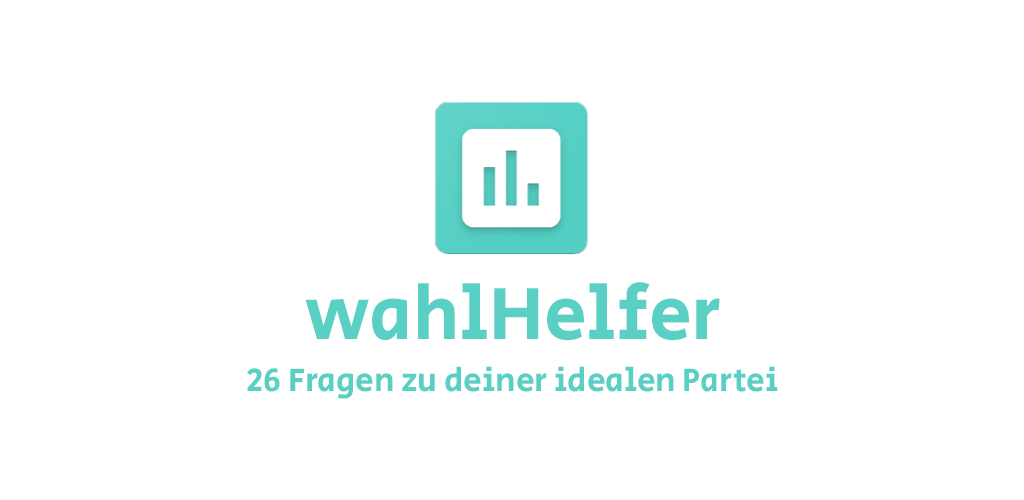
<style>
.page{position:relative;width:1024px;height:500px;background:#ffffff}
.page>*{position:absolute;margin:0}
.t1{font:76.4px "SecularOne-Regular";color:#5ad0c5}
.t2{font:33.3px "SecularOne-Regular";color:#5ad0c5}
</style>
<div class="page">
<p class="t1" style="left:305px;top:282px;width:415px;height:59px">wahlHelfer</p>
<p class="t2" style="left:247px;top:366px;width:531px;height:33px">26 Fragen zu deiner idealen Partei</p>
</div>
